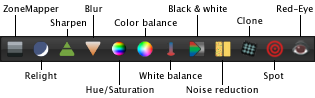
<style>
.page{position:relative;width:315px;height:98px;background:#ffffff}
.page>*{position:absolute;margin:0}
.t1{font:9px "LucidaGrande";color:#000000}
.t2{font:9px "LucidaGrande"}
</style>
<div class="page">
<p class="t1" style="left:3px;top:5px;width:56px;height:9px">ZoneMapper</p>
<p class="t2" style="left:85px;top:5px;width:18px;height:7px">Blur</p>
<p class="t1" style="left:169px;top:5px;width:58px;height:7px">Black &amp; white</p>
<p class="t1" style="left:277px;top:5px;width:36px;height:9px">Red-Eye</p>
<p class="t2" style="left:237px;top:17px;width:26px;height:7px">Clone</p>
<p class="t1" style="left:50px;top:19px;width:36px;height:9px">Sharpen</p>
<p class="t1" style="left:114px;top:19px;width:63px;height:7px">Color balance</p>
<p class="t2" style="left:25px;top:72px;width:32px;height:9px">Relight</p>
<p class="t1" style="left:139px;top:72px;width:63px;height:7px">White balance</p>
<p class="t1" style="left:264px;top:72px;width:20px;height:9px">Spot</p>
<p class="t1" style="left:86px;top:86px;width:68px;height:9px">Hue/Saturation</p>
<p class="t1" style="left:186px;top:86px;width:72px;height:7px">Noise reduction</p>
</div>
